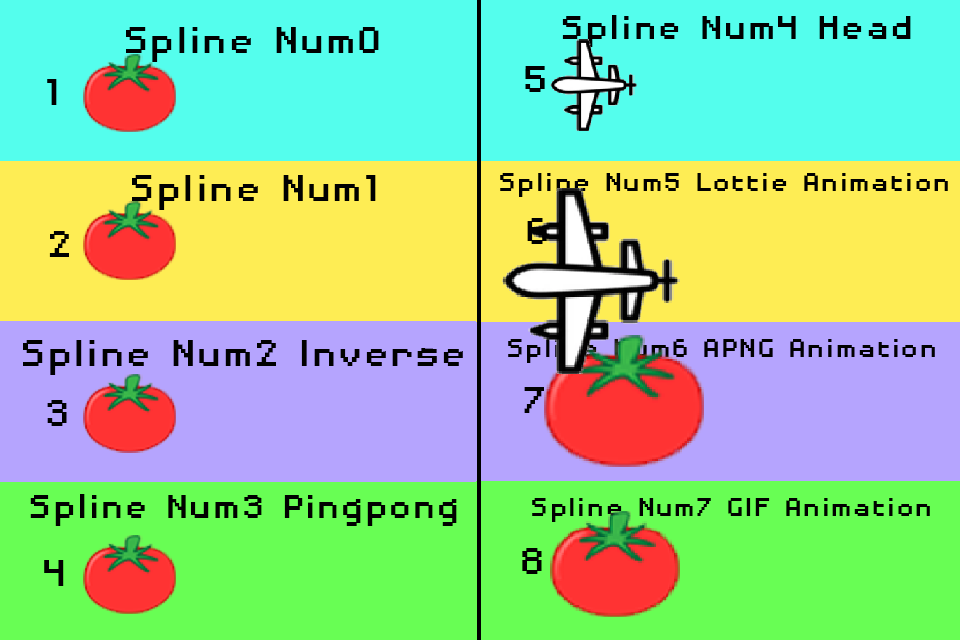
<style>
.page{position:relative;width:960px;height:640px;background:#54feed}
.page>*{position:absolute;margin:0}
.t1{font:44.1px "DisposableDroidBB";color:#010101;scale:1.13 1}
.t2{font:48.6px "DisposableDroidBB";color:#010101;scale:1.11 1}
.t3{font:48.6px "DisposableDroidBB";color:#010101;scale:1.13 1}
.t4{font:33.7px "DisposableDroidBB";color:#010101;scale:1.13 1}
.t5{font:44.1px "DisposableDroidBB";color:#010101;scale:1.11 1}
</style>
<div class="page">
<p class="t1" style="left:562px;top:15px;width:349px;height:32px">Spline Num4 Head</p>
<p class="t2" style="left:126px;top:27px;width:253px;height:35px">Spline Num0</p>
<p class="t3" style="left:525px;top:66px;width:20px;height:26px">5</p>
<p class="t2" style="left:47px;top:79px;width:10px;height:26px">1</p>
<p class="t4" style="left:500px;top:173px;width:448px;height:24px">Spline Num5 Lottie Animation</p>
<p class="t2" style="left:132px;top:175px;width:244px;height:35px">Spline Num1</p>
<p class="t3" style="left:527px;top:218px;width:20px;height:26px">6</p>
<p class="t2" style="left:49px;top:231px;width:20px;height:26px">2</p>
<p class="t2" style="left:23px;top:340px;width:440px;height:35px">Spline Num2 Inverse</p>
<p class="t4" style="left:508px;top:339px;width:427px;height:24px">Spline Num6 APNG Animation</p>
<p class="t3" style="left:524px;top:387px;width:20px;height:26px">7</p>
<p class="t2" style="left:47px;top:400px;width:20px;height:26px">3</p>
<p class="t5" style="left:30px;top:494px;width:427px;height:32px">Spline Num3 Pingpong</p>
<p class="t4" style="left:532px;top:498px;width:398px;height:24px">Spline Num7 GIF Animation</p>
<p class="t3" style="left:522px;top:548px;width:20px;height:26px">8</p>
<p class="t2" style="left:44px;top:560px;width:20px;height:26px">4</p>
</div>
